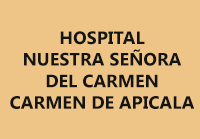
<style>
.page{position:relative;width:200px;height:139px;background:#eec586}
.page>*{position:absolute;margin:0}
.t1{font:18px "SegoeUI-Bold";color:#141414}
</style>
<div class="page">
<p class="t1" style="left:10px;top:31px;width:185px;height:78px;text-align:center">HOSPITAL<br>NUESTRA SEÑORA<br>DEL CARMEN<br>CARMEN DE APICALA</p>
</div>
